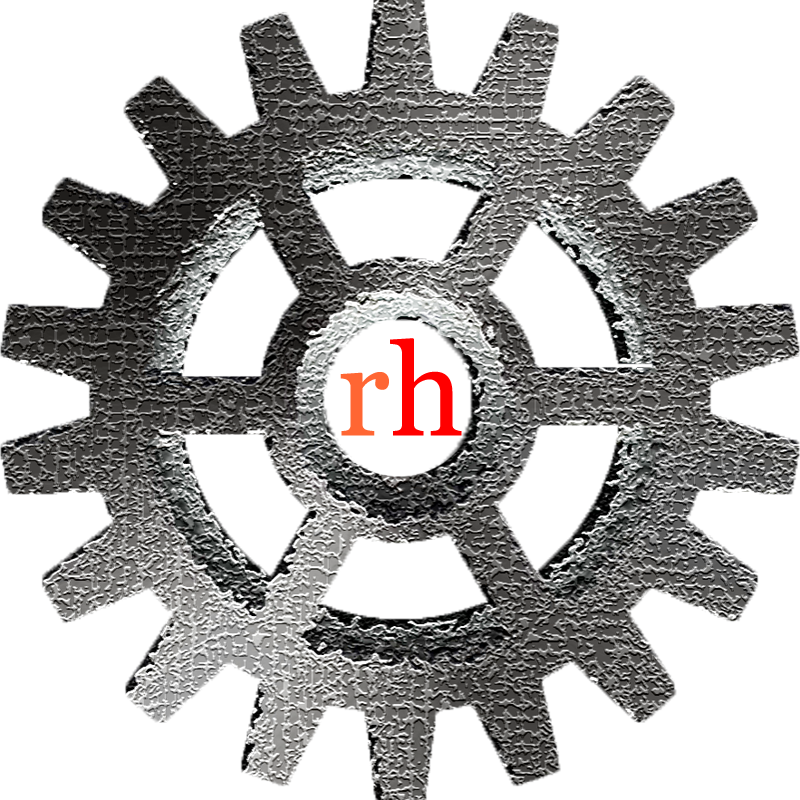
<style>
.page{position:relative;width:800px;height:800px;background:#ffffff}
.page>*{position:absolute;margin:0}
.t1{font:128.4px "Georgia";color:#ff6633}
.t2{font:128.4px "Georgia";color:#ff0000}
</style>
<div class="page">
<p class="t1" style="left:340px;top:338px;width:122px;height:98px">r<span class="t2">h</span></p>
</div>
